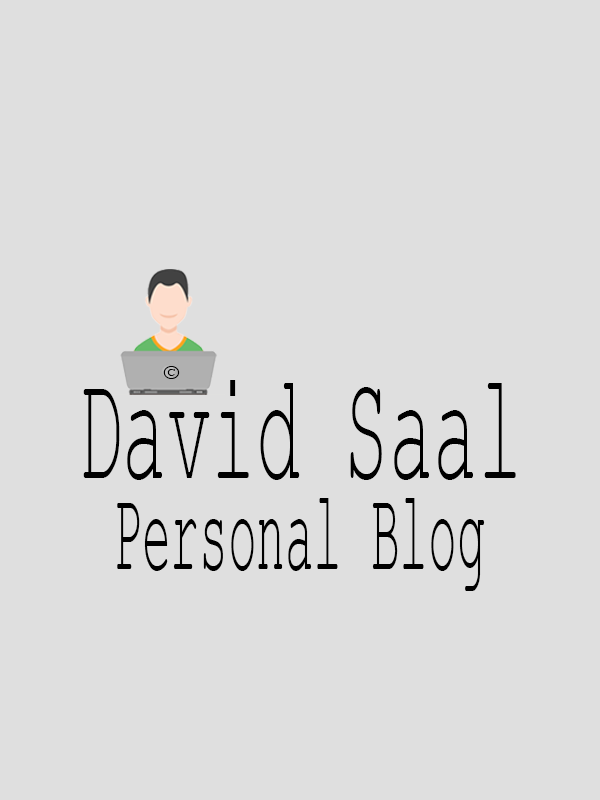
<style>
.page{position:relative;width:600px;height:800px;background:#dfdfdf}
.page>*{position:absolute;margin:0}
.t1{font:22.6px "MiriamFixed";color:#000000;scale:1.12 1}
.t2{font:155.3px "MiriamFixed";color:#000000;scale:0.48 1}
.t3{font:116.1px "MiriamFixed";color:#000000;scale:0.41 1}
</style>
<div class="page">
<p class="t1" style="left:163px;top:366px;width:17px;height:13px">©</p>
<p class="t2" style="left:83px;top:380px;width:433px;height:100px">David Saal</p>
<p class="t3" style="left:117px;top:498px;width:368px;height:93px">Personal Blog</p>
</div>
